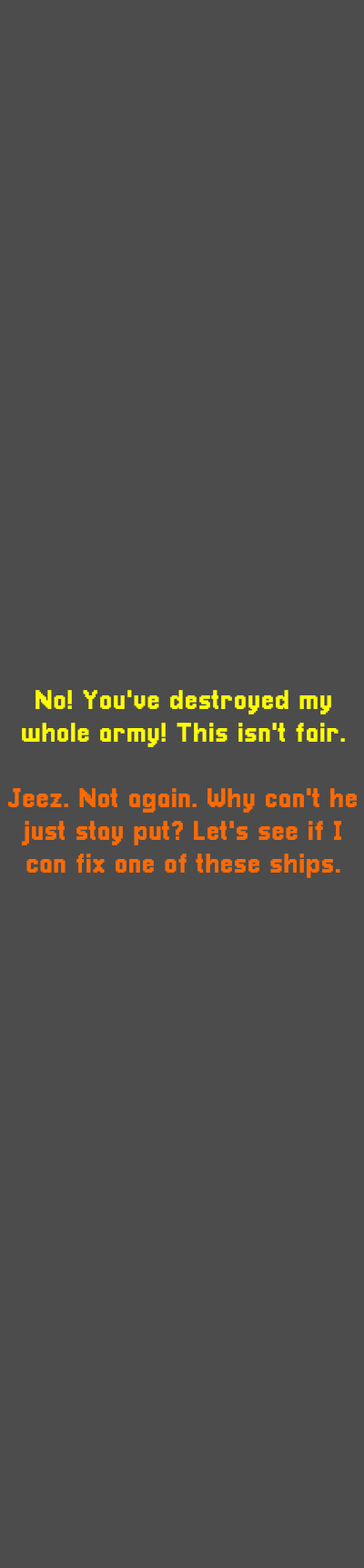
<style>
.page{position:relative;width:364px;height:1568px;background:#4c4c4c}
.page>*{position:absolute;margin:0}
.t1{font:27.3px "Pixellari";color:#ff6a00}
.t2{font:27.3px "Pixellari";color:#ffff00}
</style>
<div class="page">
<p class="t1" style="left:8px;top:690px;width:348px;height:188px;text-align:center"><span class="t2">No! You've destroyed my<br>whole army! This isn't fair.<br><br></span>Jeez. Not again. Why can't he<br>just stay put? Let's see if I<br>can fix one of these ships.</p>
</div>
